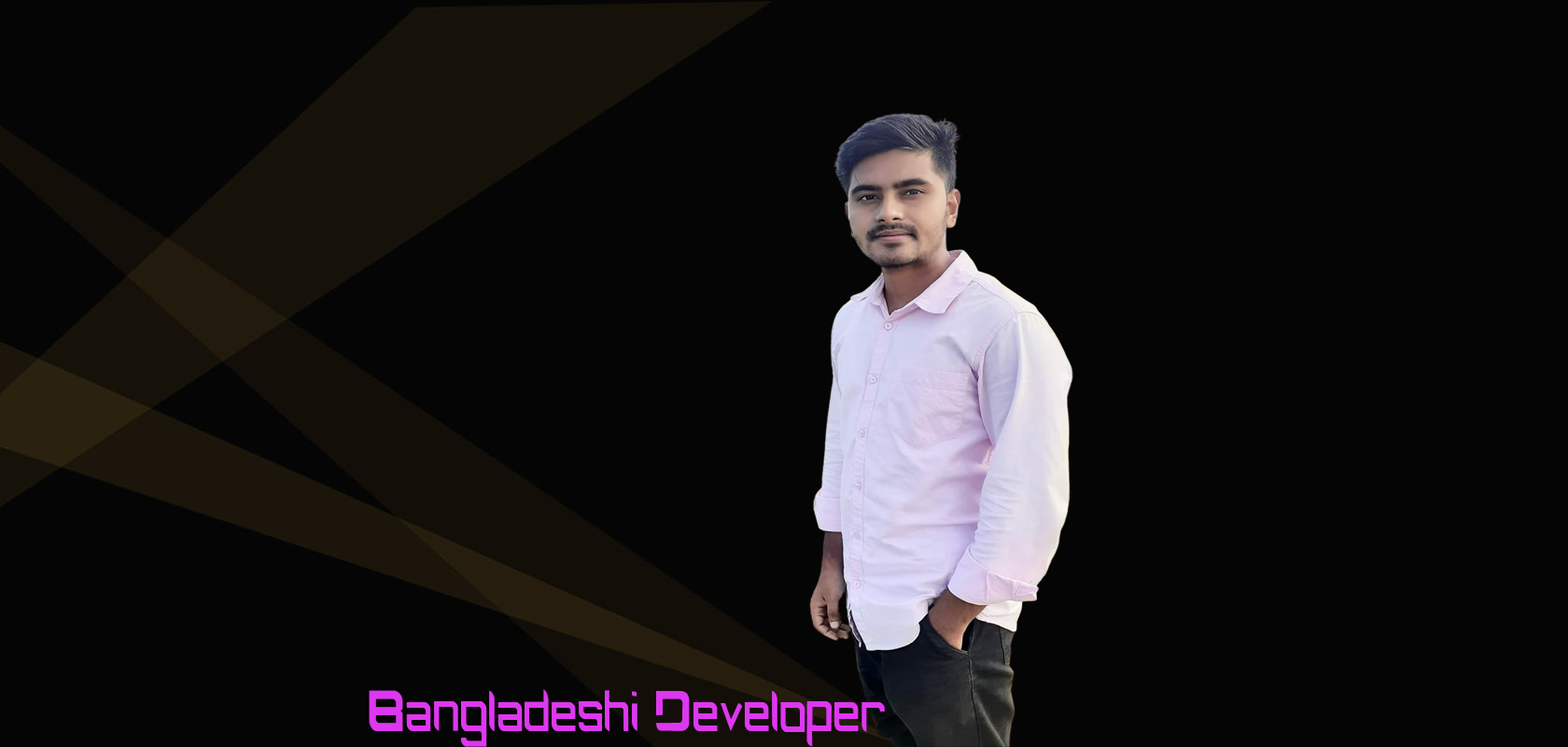
<style>
.page{position:relative;width:1568px;height:747px;background:#050505}
.page>*{position:absolute;margin:0}
.t1{font:46.7px "BLACKCAPS-Regular";color:#dd38ef;scale:0.81 1}
</style>
<div class="page">
<p class="t1" style="left:369px;top:689px;width:516px;height:58px">Bangladeshi Developer</p>
</div>
